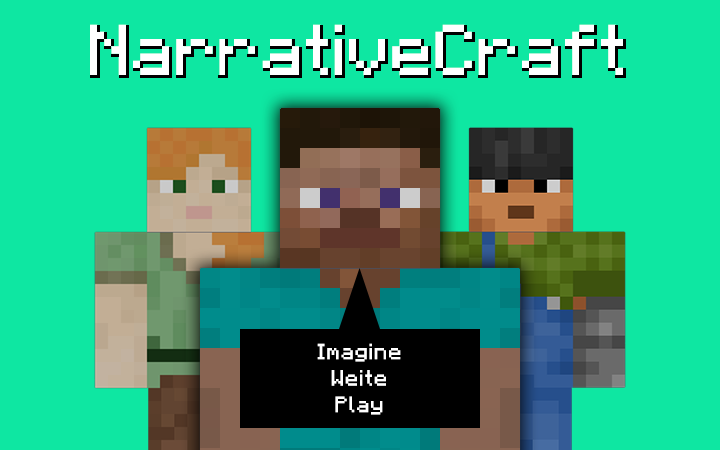
<style>
.page{position:relative;width:720px;height:450px;background:#0ee7a2}
.page>*{position:absolute;margin:0}
.t1{font:72px "Minecraft-Regular";color:#ffffff}
.t2{font:22px "Minecraft-Regular";letter-spacing:0.04em;color:#ffffff}
</style>
<div class="page">
<p class="t1" style="left:90px;top:24px;width:533px;height:52px">NarrativeCraft</p>
<p class="t2" style="left:317px;top:343px;width:84px;height:72px;text-align:center">Imagine<br>Weite<br>Play</p>
</div>
